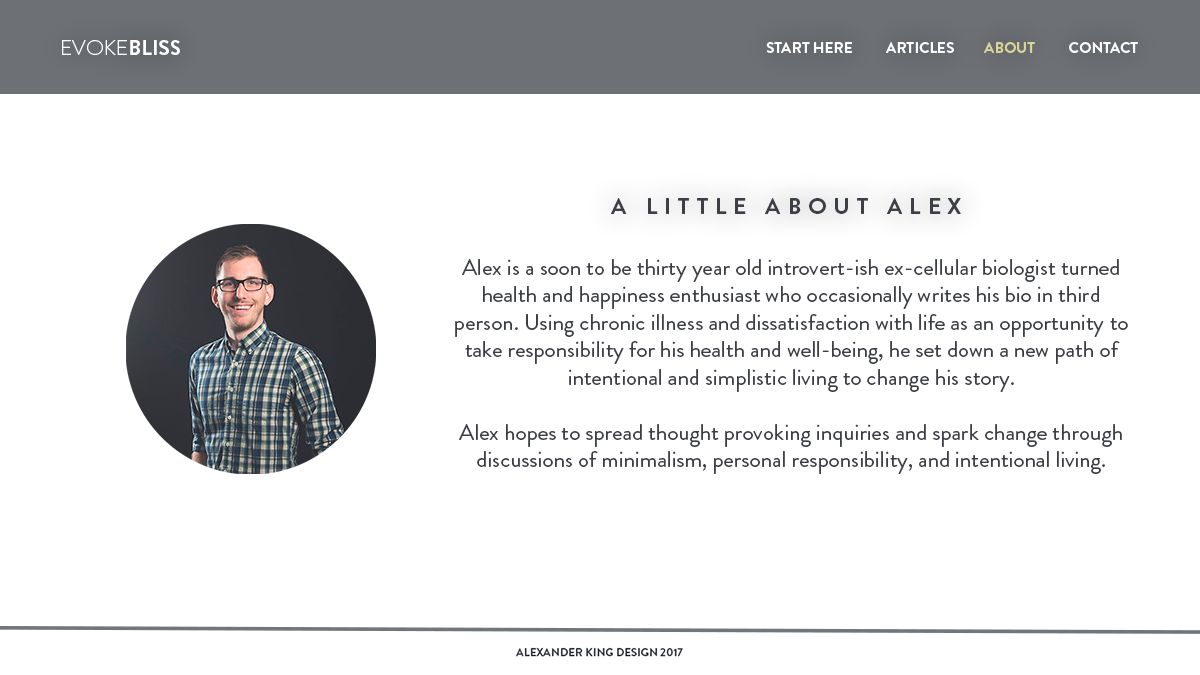
<style>
.page{position:relative;width:1200px;height:675px;background:#ffffff}
.page>*{position:absolute;margin:0}
.t1{font:21px "BrandonGrotesque-Light";color:#ffffff;text-transform:uppercase}
.t2{font:21px "BrandonGrotesque-Bold";color:#ffffff;text-transform:uppercase}
.t3{font:15.2px "BrandonGrotesque-Bold";color:#ffffff;text-transform:uppercase}
.t4{font:15.2px "BrandonGrotesque-Bold";color:#d9d599;text-transform:uppercase}
.t5{font:22.9px "BrandonGrotesque-Bold";letter-spacing:0.3em;color:#3c4046;text-transform:uppercase}
.t6{font:22.9px "BrandonGrotesque-Regular";color:#3c4046}
</style>
<div class="page">
<p class="t1" style="left:62px;top:40px;width:118px;height:15px">Evoke<span class="t2">bliss</span></p>
<p class="t3" style="left:766px;top:42px;width:86px;height:11px">Start herE</p>
<p class="t3" style="left:886px;top:42px;width:252px;height:11px">Articles         <span class="t4">about</span>          contact</p>
<p class="t5" style="left:611px;top:198px;width:350px;height:16px">A Little About Alex</p>
<p class="t6" style="left:455px;top:259px;width:673px;height:215px;text-align:center">Alex is a soon to be thirty year old introvert-ish ex-cellular biologist turned health and happiness enthusiast who occasionally writes his bio in third person. Using chronic illness and dissatisfaction with life as an opportunity to take responsibility for his health and well-being, he set down a new path of intentional and simplistic living to change his story. <br><br>Alex hopes to spread thought provoking inquiries and spark change through discussions of minimalism, personal responsibility, and intentional living.</p>
</div>
